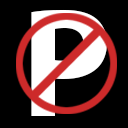
<style>
.page{position:relative;width:128px;height:128px;background:#000000}
.page>*{position:absolute;margin:0}
.t1{font:156px "MyriadPro-Bold";letter-spacing:-0.02em;color:#ffffff}
</style>
<div class="page">
<p class="t1" style="left:31px;top:9px;width:76px;height:107px">P</p>
</div>
